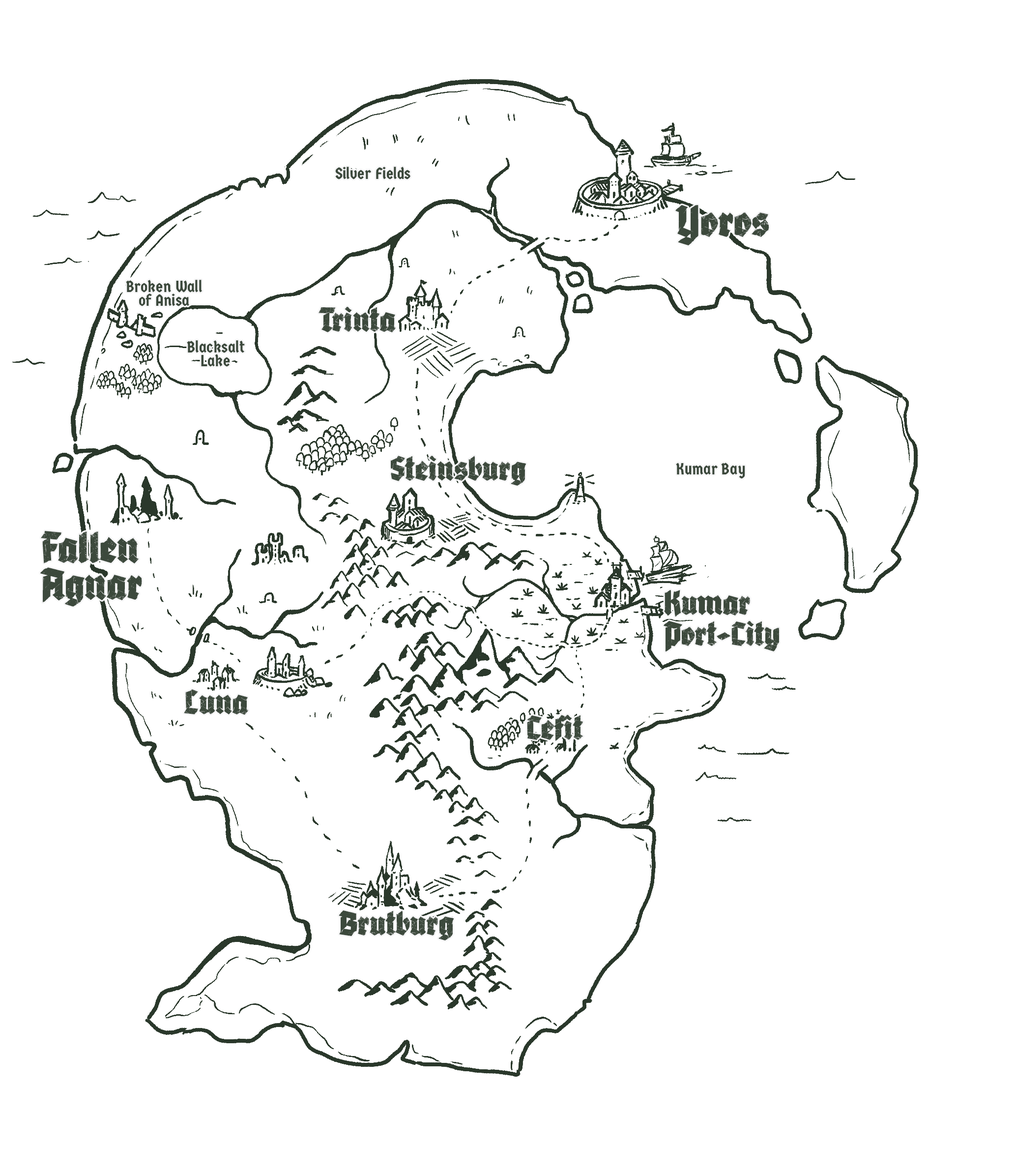
<style>
.page{position:relative;width:1015px;height:1174px;background:#ffffff}
.page>*{position:absolute;margin:0}
.t1{font:16.2px "GermaniaOne-Regular";color:#3c493c}
.t2{font:45.6px "AdhesiveNr.Seven-Regular";color:#3c493c}
.t3{font:16.2px/14.1px "GermaniaOne-Regular";color:#3c493c}
.t4{font:35.5px "AdhesiveNr.Seven-Regular";color:#3c493c}
.t5{font:45.6px/37px "AdhesiveNr.Seven-Regular";color:#3c493c}
.t6{font:35.5px/30.8px "AdhesiveNr.Seven-Regular";color:#3c493c}
</style>
<div class="page">
<p class="t1" style="left:335px;top:167px;width:76px;height:12px">Silver Fields</p>
<p class="t2" style="left:676px;top:205px;width:94px;height:40px">Yoros</p>
<p class="t3" style="left:126px;top:280px;width:77px;height:26px;text-align:center">Broken Wall<br>of Anisa</p>
<p class="t4" style="left:319px;top:307px;width:77px;height:25px">Trinta</p>
<p class="t3" style="left:187px;top:340px;width:58px;height:27px;text-align:center">Blacksalt<br>Lake</p>
<p class="t4" style="left:391px;top:456px;width:136px;height:30px">Steinsburg</p>
<p class="t1" style="left:676px;top:463px;width:69px;height:16px">Kumar Bay</p>
<p class="t5" style="left:40px;top:531px;width:102px;height:76px">Fallen<br>Agnar</p>
<p class="t6" style="left:664px;top:590px;width:116px;height:62px">Kumar<br>Port-City</p>
<p class="t4" style="left:184px;top:689px;width:65px;height:26px">Luna</p>
<p class="t4" style="left:527px;top:715px;width:57px;height:26px">Cefit</p>
<p class="t4" style="left:339px;top:911px;width:115px;height:30px">Brutburg</p>
</div>
